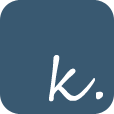
<style>
.page{position:relative;width:114px;height:114px;background:#395971}
.page>*{position:absolute;margin:0}
.t1{font:60px "SegoeScript";color:#ffffff}
</style>
<div class="page">
<p class="t1" style="left:49px;top:55px;width:54px;height:47px">k.</p>
</div>
